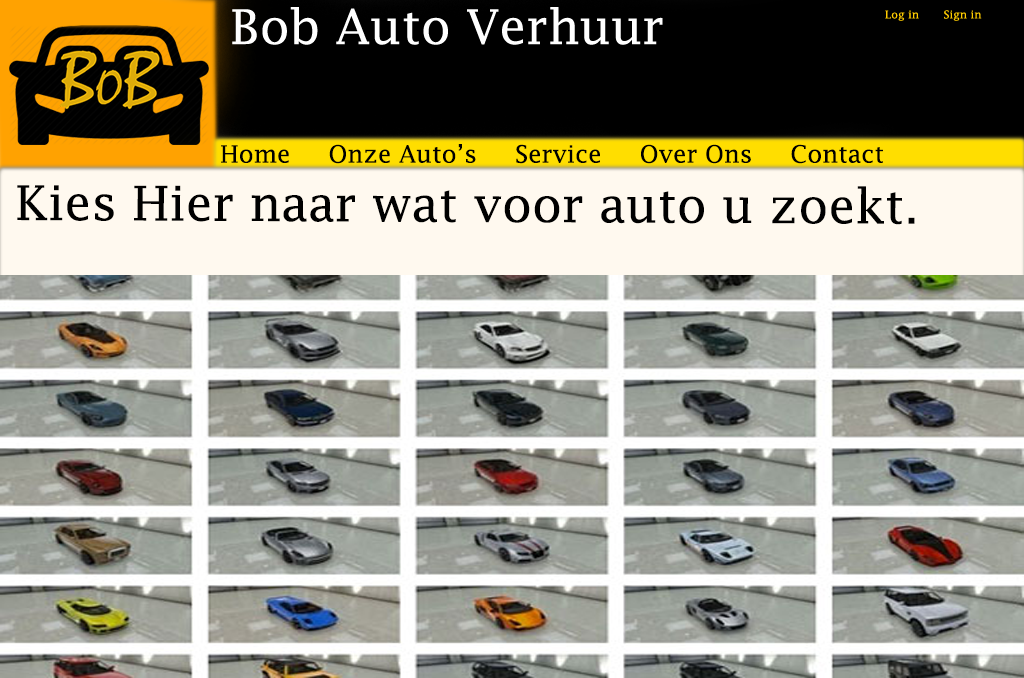
<style>
.page{position:relative;width:1024px;height:678px}
.page>*{position:absolute;margin:0}
.t1{font:24px "LucidaFax";color:#000000}
.t2{font:48px "LucidaFax";color:#000000}
</style>
<div class="page">
<p class="t1" style="left:221px;top:144px;width:662px;height:20px">Home     Onze Auto’s     Service     Over Ons     Contact</p>
<p class="t2" style="left:17px;top:185px;width:898px;height:40px">Kies Hier naar wat voor auto u zoekt. :)</p>
</div>
